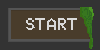
<style>
.page{position:relative;width:100px;height:50px;background:#333333}
.page>*{position:absolute;margin:0}
.t1{font:18px "VCROSDMono";color:#d9d9d9}
</style>
<div class="page">
<p class="t1" style="left:26px;top:18px;width:51px;height:12px">START</p>
</div>
